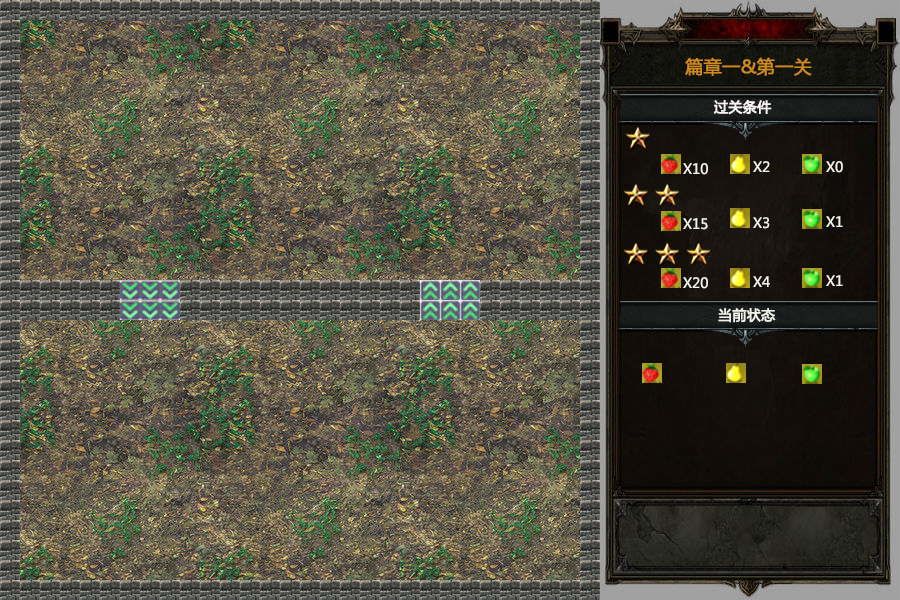
<style>
.page{position:relative;width:900px;height:600px}
.page>*{position:absolute;margin:0}
.t1{font:18px "MicrosoftYaHei";color:#cf8b20;font-weight:bold}
.t2{font:14px "MicrosoftYaHei";color:#f9f3f3;font-weight:bold}
.t3{font:14px "MicrosoftYaHei";color:#f1f0e9}
.t4{font:14px "MicrosoftYaHei";color:#f1f0e9;font-weight:bold}
</style>
<div class="page">
<p class="t1" style="left:685px;top:57px;width:127px;height:19px">篇章一&amp;第一关</p>
<p class="t2" style="left:714px;top:100px;width:58px;height:15px">过关条件</p>
<p class="t3" style="left:753px;top:161px;width:17px;height:11px">X2</p>
<p class="t3" style="left:826px;top:161px;width:17px;height:12px">X0</p>
<p class="t3" style="left:683px;top:163px;width:25px;height:12px">X10</p>
<p class="t3" style="left:683px;top:218px;width:25px;height:12px">X15</p>
<p class="t3" style="left:753px;top:217px;width:17px;height:12px">X3</p>
<p class="t3" style="left:826px;top:216px;width:17px;height:11px">X1</p>
<p class="t3" style="left:683px;top:277px;width:25px;height:12px">X20</p>
<p class="t3" style="left:753px;top:276px;width:17px;height:11px">X4</p>
<p class="t3" style="left:826px;top:275px;width:17px;height:11px">X1</p>
<p class="t4" style="left:718px;top:308px;width:58px;height:15px">当前状态</p>
</div>
